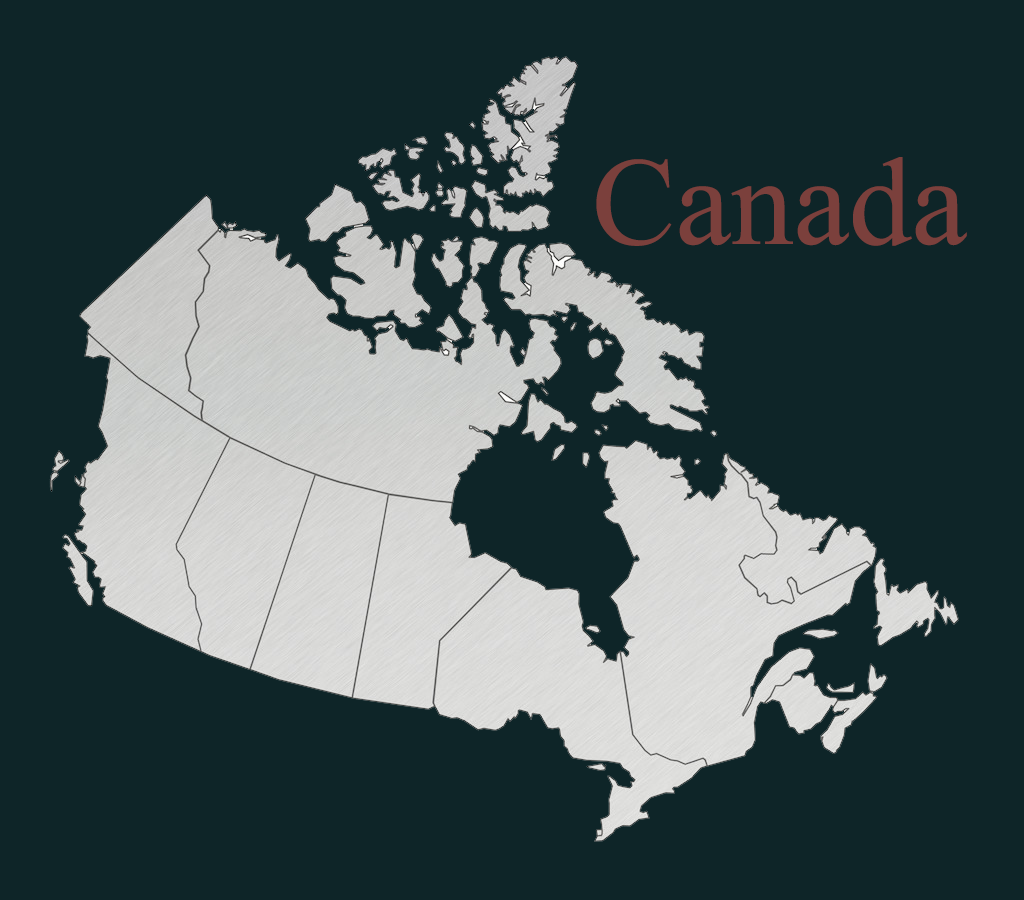
<style>
.page{position:relative;width:1024px;height:900px;background:#0e2528}
.page>*{position:absolute;margin:0}
.t1{font:125px "TimesNewRomanPSMT";color:#7b403c}
</style>
<div class="page">
<p class="t1" style="left:596px;top:157px;width:371px;height:89px">Canada</p>
</div>
